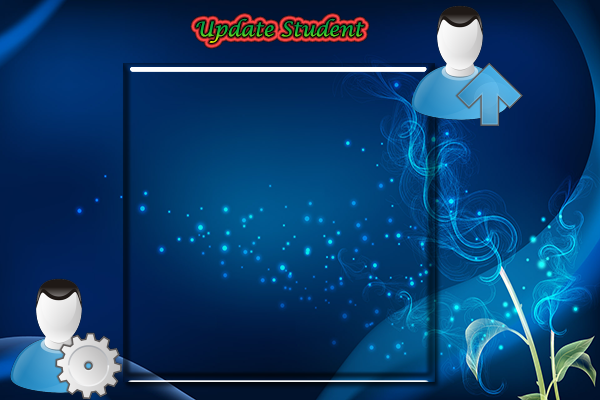
<style>
.page{position:relative;width:600px;height:400px}
.page>*{position:absolute;margin:0}
.t1{font:20px "LucidaCalligraphy-Italic"}
</style>
<div class="page">
<p class="t1" style="left:196px;top:18px;width:168px;height:25px">Update Student</p>
</div>
